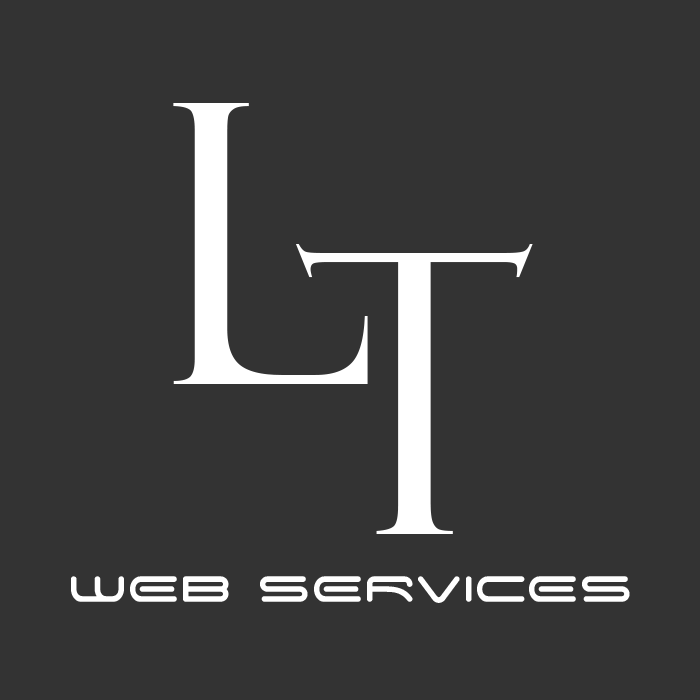
<style>
.page{position:relative;width:700px;height:700px;background:#333333}
.page>*{position:absolute;margin:0}
.t1{font:391.1px "FelixTitlingMT";color:#ffffff}
.t2{font:58.3px "SpaceAge";color:#ffffff}
</style>
<div class="page">
<p class="t1" style="left:173px;top:103px;width:195px;height:281px">L</p>
<p class="t1" style="left:295px;top:244px;width:238px;height:290px">T</p>
<p class="t2" style="left:71px;top:576px;width:559px;height:27px">WEB SERVICES</p>
</div>
